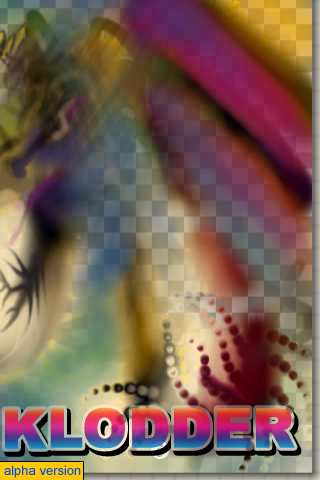
<style>
.page{position:relative;width:320px;height:480px}
.page>*{position:absolute;margin:0}
.t1{font:54px "Arial-Black";font-weight:bold}
.t2{font:13px "ArialMT";color:#0048ff}
</style>
<div class="page">
<p class="t1" style="left:4px;top:407px;width:291px;height:42px">KLODDER</p>
<p class="t2" style="left:4px;top:465px;width:77px;height:13px">alpha version</p>
</div>
